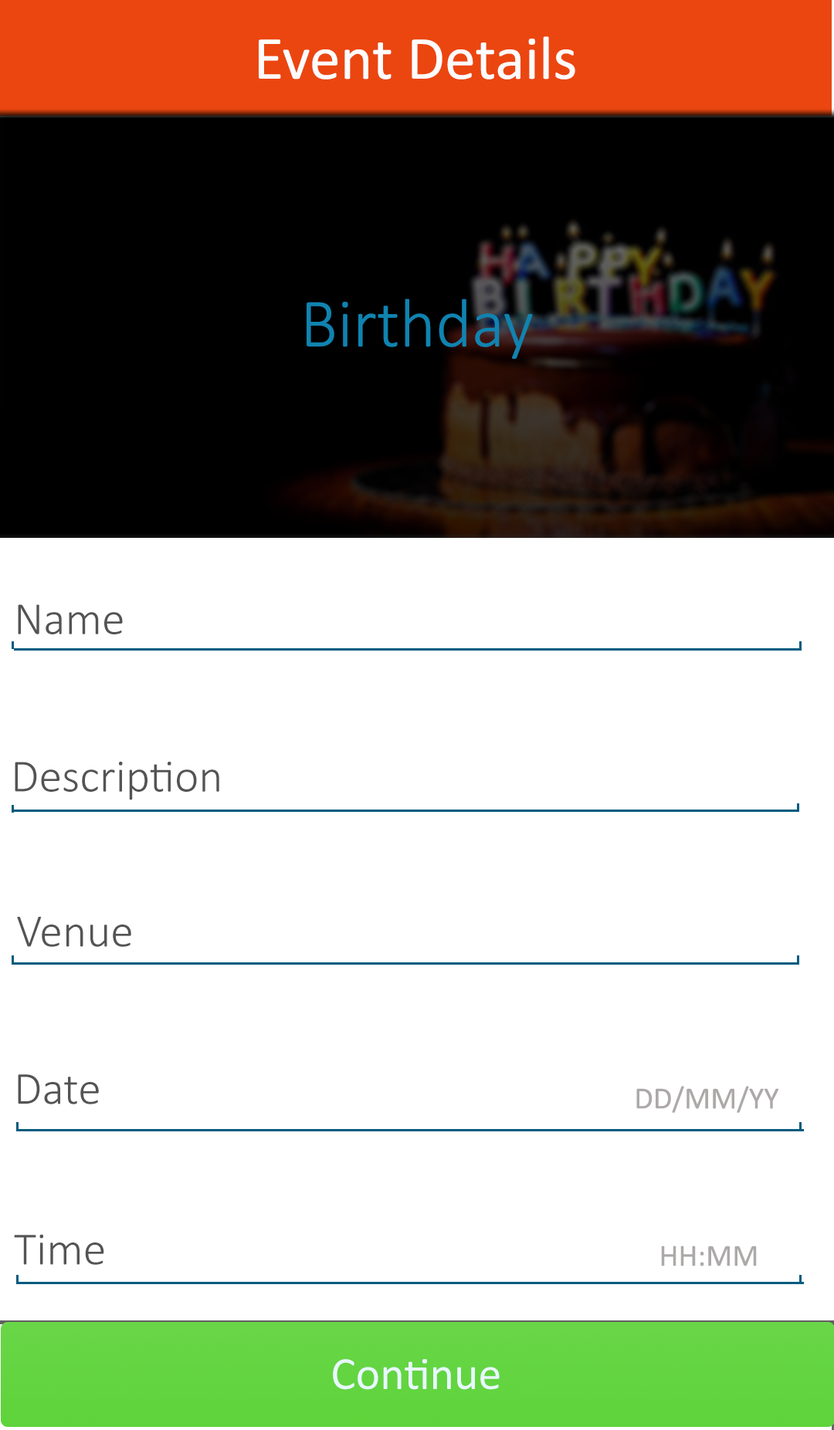
<style>
.page{position:relative;width:834px;height:1430px;background:#ffffff}
.page>*{position:absolute;margin:0}
.t1{font:61.8px "Calibri";color:#fdfcfc}
.t2{font:69.5px "Calibri-Light";color:#1083b0}
.t3{font:46.3px "Calibri-Light";color:#545454}
.t4{font:30.9px "Calibri";color:#ada9a9}
.t5{font:46.3px "Calibri";color:#e8f7ff}
</style>
<div class="page">
<p class="t1" style="left:259px;top:36px;width:316px;height:44px">Event Details</p>
<p class="t2" style="left:306px;top:299px;width:227px;height:60px">Birthday</p>
<p class="t3" style="left:18px;top:604px;width:105px;height:31px">Name</p>
<p class="t3" style="left:15px;top:762px;width:204px;height:38px">Description</p>
<p class="t3" style="left:17px;top:917px;width:114px;height:30px">Venue</p>
<p class="t3" style="left:18px;top:1075px;width:81px;height:30px">Date</p>
<p class="t4" style="left:636px;top:1086px;width:143px;height:27px">DD/MM/YY</p>
<p class="t3" style="left:14px;top:1234px;width:90px;height:31px">Time</p>
<p class="t4" style="left:661px;top:1246px;width:95px;height:21px">HH:MM</p>
<p class="t5" style="left:333px;top:1359px;width:166px;height:31px">Continue</p>
</div>
